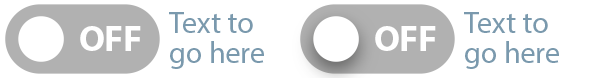
<style>
.page{position:relative;width:590px;height:78px;background:#ffffff}
.page>*{position:absolute;margin:0}
.t1{font:30px/30px "MyriadPro-Regular";color:#7b99ae}
.t2{font:36px "MyriadPro-Bold";color:#ffffff}
</style>
<div class="page">
<p class="t1" style="left:169px;top:12px;width:95px;height:57px">Text to go here</p>
<p class="t1" style="left:464px;top:12px;width:95px;height:57px">Text to go here</p>
<p class="t2" style="left:80px;top:26px;width:61px;height:25px">OFF</p>
<p class="t2" style="left:375px;top:26px;width:61px;height:25px">OFF</p>
</div>
